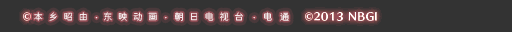
<style>
.page{position:relative;width:512px;height:32px;background:#333333}
.page>*{position:absolute;margin:0}
.t1{font:9px "JiangChengYuanTi-300W";color:#ffffff}
</style>
<div class="page">
<p class="t1" style="left:34px;top:12px;width:255px;height:9px">本   乡   昭   由    ·   东   映   动   画    ·    朝   日   电   视   台     ·    电    通</p>
</div>
